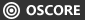
<style>
.page{position:relative;width:85px;height:20px;background:#333333}
.page>*{position:absolute;margin:0}
.t1{font:14px "Ebrima-Bold";color:#ffffff}
</style>
<div class="page">
<p class="t1" style="left:26px;top:5px;width:54px;height:11px">OSCORE</p>
</div>
